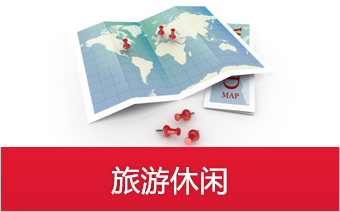
<style>
.page{position:relative;width:340px;height:212px;background:#ffffff}
.page>*{position:absolute;margin:0}
.t1{font:28.6px "MicrosoftYaHei";color:#fefefe;font-weight:bold}
</style>
<div class="page">
<p class="t1" style="left:111px;top:166px;width:116px;height:29px">旅游休闲</p>
</div>
